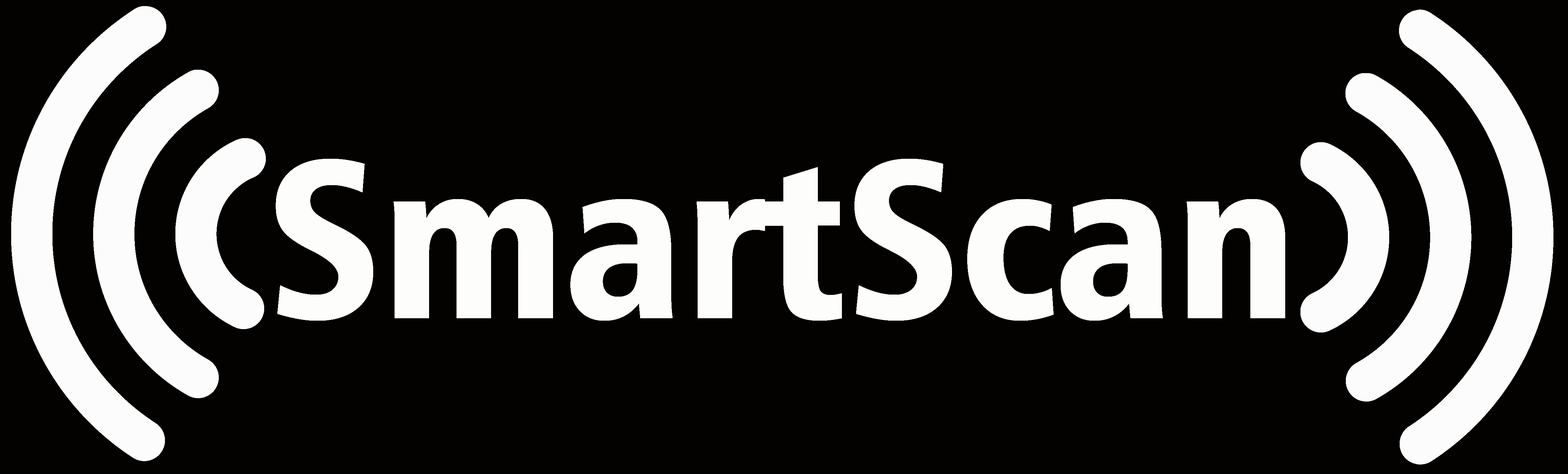
<style>
.page{position:relative;width:1568px;height:474px;background:#030200}
.page>*{position:absolute;margin:0}
.t1{font:225.7px "Humanist777BT-BlackCondensedB";color:#fdfdfc}
</style>
<div class="page">
<p class="t1" style="left:276px;top:159px;width:1009px;height:162px">SmartScan</p>
</div>
